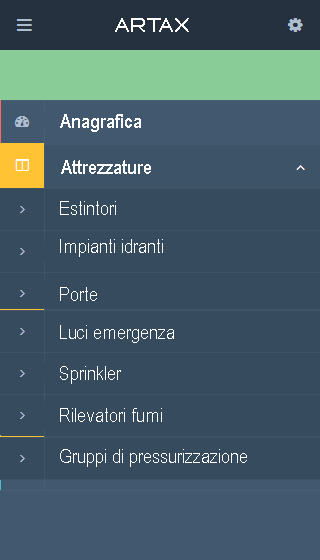
<style>
.page{position:relative;width:320px;height:560px;background:#374b5e}
.page>*{position:absolute;margin:0}
.t1{font:20px "QueentalBold";color:#ffffff}
.t2{font:20px "ArialNarrow-Bold";color:#ffffff}
.t3{font:20px "ArialNarrow";color:#ffffff}
</style>
<div class="page">
<p class="t1" style="left:115px;top:18px;width:74px;height:14px">ARTAX</p>
<p class="t2" style="left:60px;top:114px;width:81px;height:18px">Anagrafica</p>
<p class="t2" style="left:61px;top:160px;width:90px;height:14px">Attrezzature</p>
<p class="t3" style="left:60px;top:201px;width:56px;height:14px">Estintori</p>
<p class="t3" style="left:60px;top:239px;width:103px;height:18px">Impianti idranti</p>
<p class="t3" style="left:60px;top:287px;width:37px;height:14px">Porte</p>
<p class="t3" style="left:60px;top:325px;width:114px;height:18px">Luci emergenza</p>
<p class="t3" style="left:60px;top:366px;width:61px;height:18px">Sprinkler</p>
<p class="t3" style="left:60px;top:408px;width:102px;height:14px">Rilevatori fumi</p>
<p class="t3" style="left:60px;top:449px;width:187px;height:18px">Gruppi di pressurizzazione</p>
</div>
